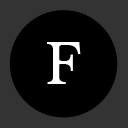
<style>
.page{position:relative;width:128px;height:128px;background:#000000}
.page>*{position:absolute;margin:0}
.t1{font:62.5px "Marion-Regular";color:#ffffff}
</style>
<div class="page">
<p class="t1" style="left:47px;top:42px;width:34px;height:42px">F</p>
</div>
